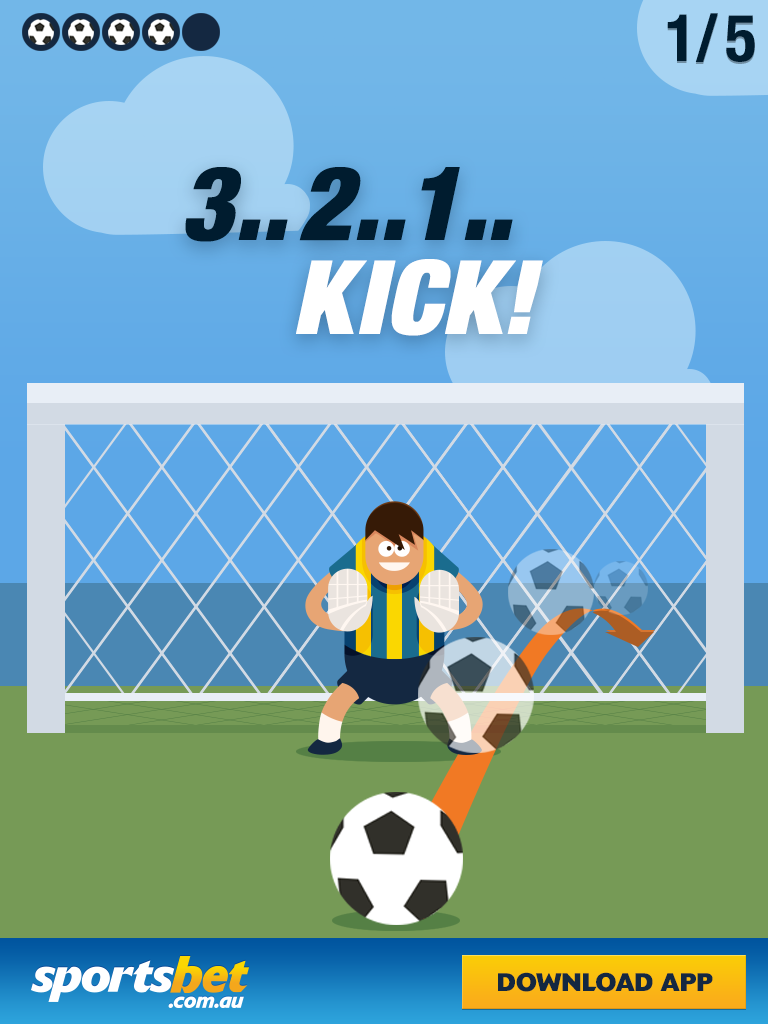
<style>
.page{position:relative;width:768px;height:1024px}
.page>*{position:absolute;margin:0}
.t1{font:112.2px "HelveticaNeueLTStd-BdCn";color:#001c2f}
.t2{font:176.4px "HelveticaNeueLTStd-BlkCnO";color:#001c2f}
.t3{font:176.4px "HelveticaNeueLTStd-XBlkCnO";color:#ffffff}
.t4{font:25px "DeltaBQ-Bold";color:#142841;text-transform:uppercase}
</style>
<div class="page">
<p class="t1" style="left:667px;top:13px;width:88px;height:49px">1/5</p>
<p class="t2" style="left:185px;top:167px;width:328px;height:75px">3..2..1..</p>
<p class="t3" style="left:296px;top:259px;width:247px;height:77px">KICK!</p>
<p class="t4" style="left:498px;top:972px;width:215px;height:20px">DOWNLOAD APP</p>
</div>
